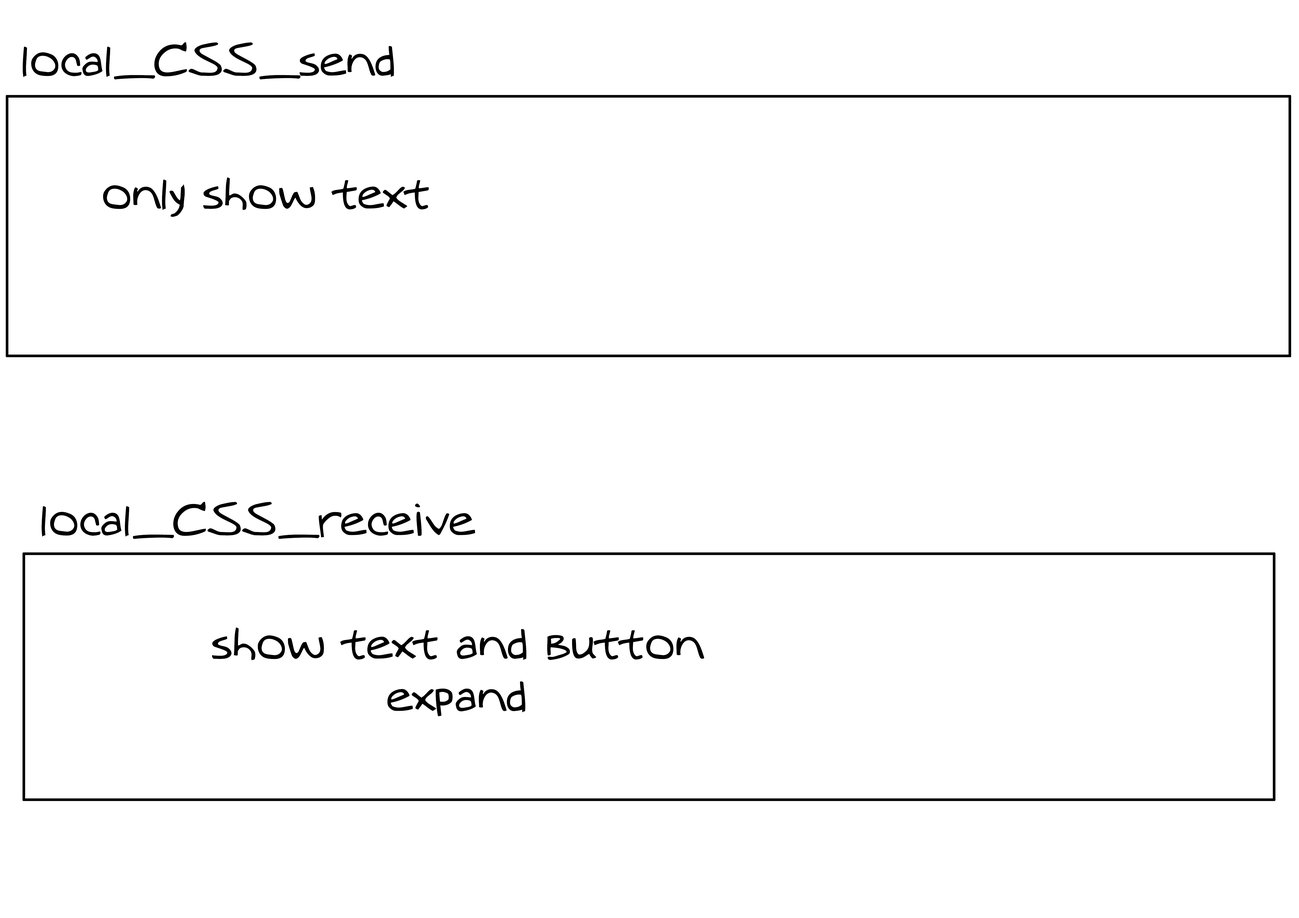
<style>
.page{position:relative;width:1299px;height:918px;background:#ffffff}
.page>*{position:absolute;margin:0}
.t1{font:43.6px "MTOaugie-Regular";color:#000000}
</style>
<div class="page">
<p class="t1" style="left:23px;top:42px;width:371px;height:38px">local_CSS_send</p>
<p class="t1" style="left:103px;top:177px;width:326px;height:40px">only show text</p>
<p class="t1" style="left:42px;top:502px;width:433px;height:37px">local_CSS_receive</p>
<p class="t1" style="left:212px;top:627px;width:492px;height:89px;text-align:center">show text and button expand</p>
</div>
